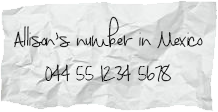
<style>
.page{position:relative;width:218px;height:112px}
.page>*{position:absolute;margin:0}
.t1{font:50px/33.3px "SeptemberMornings";letter-spacing:-0.023em;color:#000000}
.t2{font:50px/33.3px "SeptemberMornings";letter-spacing:-0.015em;color:#000000}
</style>
<div class="page">
<p class="t1" style="left:14px;top:16px;width:189px;height:66px;text-align:center">Allison’s number in Mexico <br><span class="t2">044 55 1234 5678</span></p>
</div>
